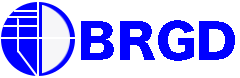
<style>
.page{position:relative;width:240px;height:78px;background:#ffffff}
.page>*{position:absolute;margin:0}
.t1{font:48px "HiraKakuStdN-W8";color:#0000ff}
</style>
<div class="page">
<p class="t1" style="left:81px;top:20px;width:154px;height:41px">BRGD</p>
</div>
